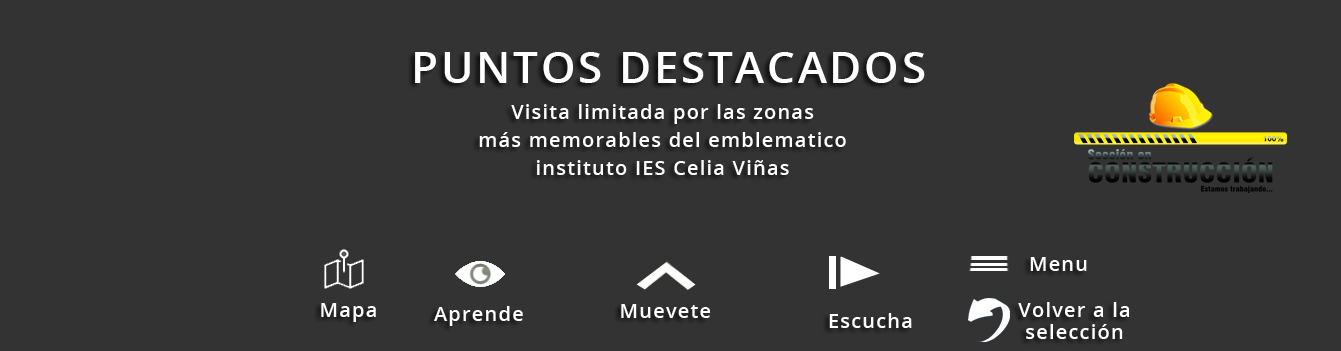
<style>
.page{position:relative;width:1341px;height:351px;background:#333333}
.page>*{position:absolute;margin:0}
.t1{font:44px "OpenSans-Semibold";letter-spacing:0.06em;color:#ffffff}
.t2{font:20px/28px "OpenSans-Semibold";letter-spacing:0.06em;color:#ffffff}
.t3{font:20px "OpenSans-Semibold";letter-spacing:0.06em;color:#ffffff}
.t4{font:20px/22.7px "OpenSans-Semibold";letter-spacing:0.06em;color:#ffffff}
</style>
<div class="page">
<p class="t1" style="left:415px;top:52px;width:510px;height:31px">PUNTOS DESTACADOS</p>
<p class="t2" style="left:479px;top:104px;width:367px;height:71px;text-align:center">Visita limitada por las zonas<br>más memorables del emblematico<br>instituto IES Celia Viñas</p>
<p class="t3" style="left:1030px;top:257px;width:57px;height:14px">Menu</p>
<p class="t3" style="left:321px;top:303px;width:55px;height:19px">Mapa</p>
<p class="t3" style="left:621px;top:304px;width:89px;height:14px">Muevete</p>
<p class="t4" style="left:1018px;top:302px;width:111px;height:37px;text-align:center">Volver a la<br>selección</p>
<p class="t3" style="left:434px;top:306px;width:89px;height:20px">Aprende</p>
<p class="t3" style="left:829px;top:313px;width:83px;height:15px">Escucha</p>
</div>
